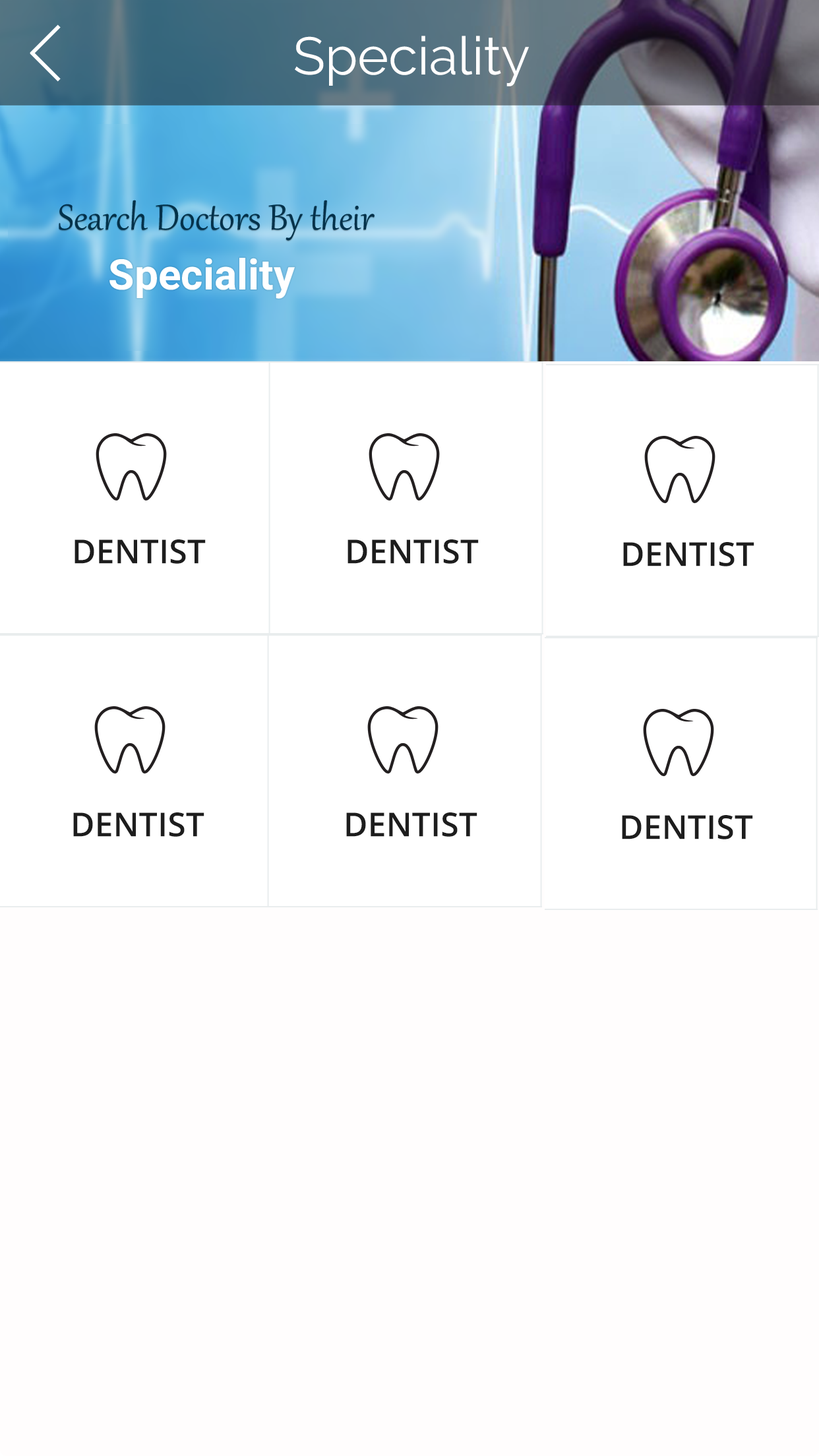
<style>
.page{position:relative;width:819px;height:1456px;background:#fffdfd}
.page>*{position:absolute;margin:0}
.t1{font:52.8px "Raleway-Regular";color:#fffefe}
.t2{font:33px "OpenSans-Semibold";color:#1d1d1d;text-transform:uppercase}
</style>
<div class="page">
<p class="t1" style="left:295px;top:36px;width:234px;height:50px">Speciality</p>
<p class="t2" style="left:75px;top:539px;width:131px;height:25px">DENTIST</p>
<p class="t2" style="left:348px;top:539px;width:131px;height:25px">DENTIST</p>
<p class="t2" style="left:623px;top:542px;width:131px;height:24px">DENTIST</p>
<p class="t2" style="left:73px;top:812px;width:131px;height:25px">DENTIST</p>
<p class="t2" style="left:346px;top:812px;width:131px;height:25px">DENTIST</p>
<p class="t2" style="left:622px;top:815px;width:131px;height:24px">DENTIST</p>
</div>
